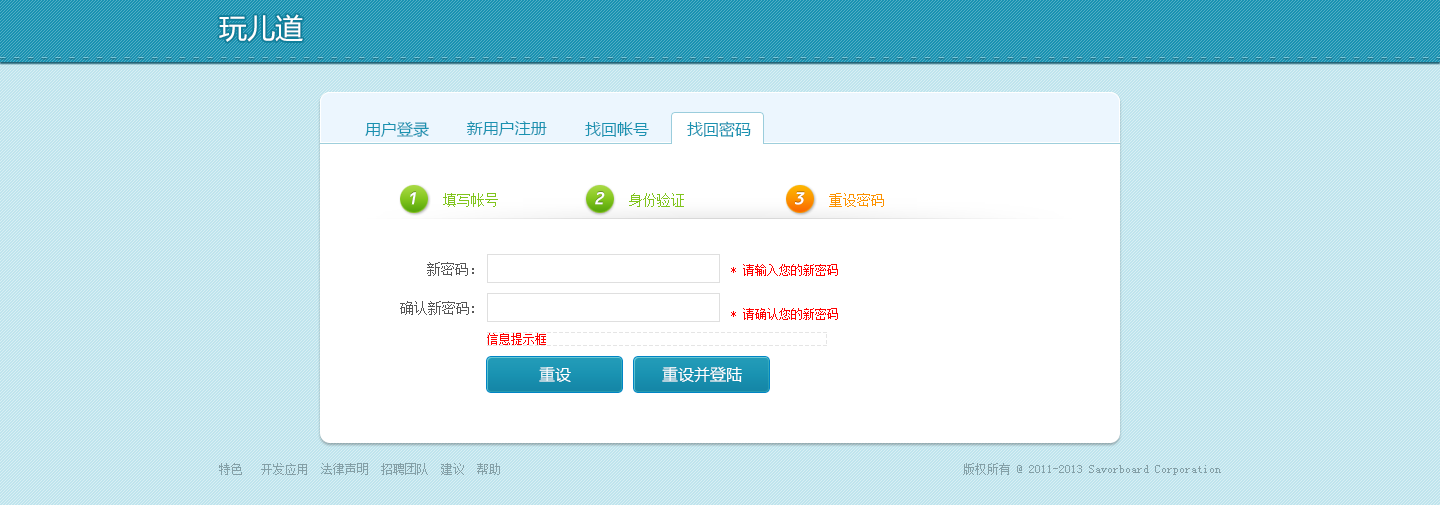
<style>
.page{position:relative;width:1440px;height:505px;background:#bfe4ed}
.page>*{position:absolute;margin:0}
.t1{font:28px "MicrosoftYaHei";color:#ffffff}
.t2{font:16px "MicrosoftYaHei";color:#1992b1}
.t3{font:19px "OCRB10PitchBT-Regular";color:#ffffff;font-style:italic}
.t4{font:14px "SimSun";color:#80c41c}
.t5{font:14px "SimSun";color:#fc9200}
.t6{font:14px "SimSun";color:#555555}
.t7{font:12px "SimSun";color:#ff0000}
.t8{font:12px "SimSun";color:#ff0101}
.t9{font:16px "MicrosoftYaHei";color:#ffffff}
.t10{font:12px "SimSun";color:#849fa6}
</style>
<div class="page">
<p class="t1" style="left:219px;top:14px;width:84px;height:28px">玩儿道</p>
<p class="t2" style="left:365px;top:121px;width:64px;height:16px">用户登录</p>
<p class="t2" style="left:466px;top:121px;width:81px;height:15px">新用户注册</p>
<p class="t2" style="left:585px;top:122px;width:64px;height:15px">找回帐号</p>
<p class="t2" style="left:687px;top:121px;width:64px;height:17px">找回密码</p>
<p class="t3" style="left:410px;top:192px;width:6px;height:13px">1</p>
<p class="t4" style="left:443px;top:193px;width:55px;height:14px">填写帐号</p>
<p class="t3" style="left:595px;top:192px;width:10px;height:13px">2</p>
<p class="t4" style="left:629px;top:193px;width:55px;height:14px">身份验证</p>
<p class="t3" style="left:795px;top:192px;width:10px;height:13px">3</p>
<p class="t5" style="left:829px;top:193px;width:55px;height:14px">重设密码</p>
<p class="t6" style="left:427px;top:262px;width:47px;height:14px">新密码：</p>
<p class="t7" style="left:731px;top:264px;width:107px;height:12px">* 请输入您的新密码</p>
<p class="t6" style="left:400px;top:301px;width:74px;height:14px">确认新密码:</p>
<p class="t7" style="left:731px;top:308px;width:107px;height:12px">* 请确认您的新密码</p>
<p class="t8" style="left:487px;top:333px;width:59px;height:12px">信息提示框</p>
<p class="t9" style="left:662px;top:366px;width:80px;height:16px">重设并登陆</p>
<p class="t9" style="left:539px;top:367px;width:32px;height:15px">重设</p>
<p class="t10" style="left:219px;top:463px;width:281px;height:12px">特色   开发应用  法律声明  招聘团队  建议  帮助</p>
<p class="t10" style="left:963px;top:463px;width:258px;height:12px">版权所有 @ 2011-2013 Savorboard Corporation</p>
</div>
